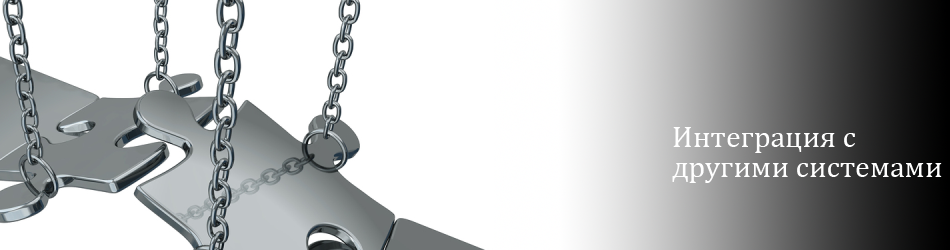
<style>
.page{position:relative;width:950px;height:250px;background:#ffffff}
.page>*{position:absolute;margin:0}
.t1{font:30px/30px "Cambria";color:#ffffff}
</style>
<div class="page">
<p class="t1" style="left:672px;top:127px;width:270px;height:56px">Интеграция с  <br>другими системами</p>
</div>
